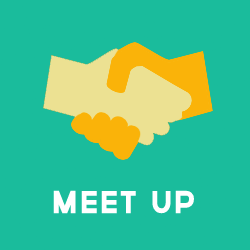
<style>
.page{position:relative;width:250px;height:250px;background:#1abc9c}
.page>*{position:absolute;margin:0}
.t1{font:30px "Governor";color:#ffffff}
</style>
<div class="page">
<p class="t1" style="left:53px;top:190px;width:141px;height:24px">meet up</p>
</div>
